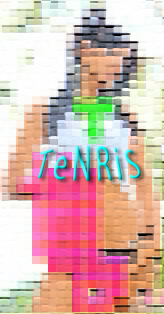
<style>
.page{position:relative;width:164px;height:314px}
.page>*{position:absolute;margin:0}
.t1{font:33.9px "MyriadPro-Regular";letter-spacing:0.12em;scale:0.9 1}
</style>
<div class="page">
<p class="t1" style="left:38px;top:145px;width:103px;height:36px">TeNRiS</p>
</div>
